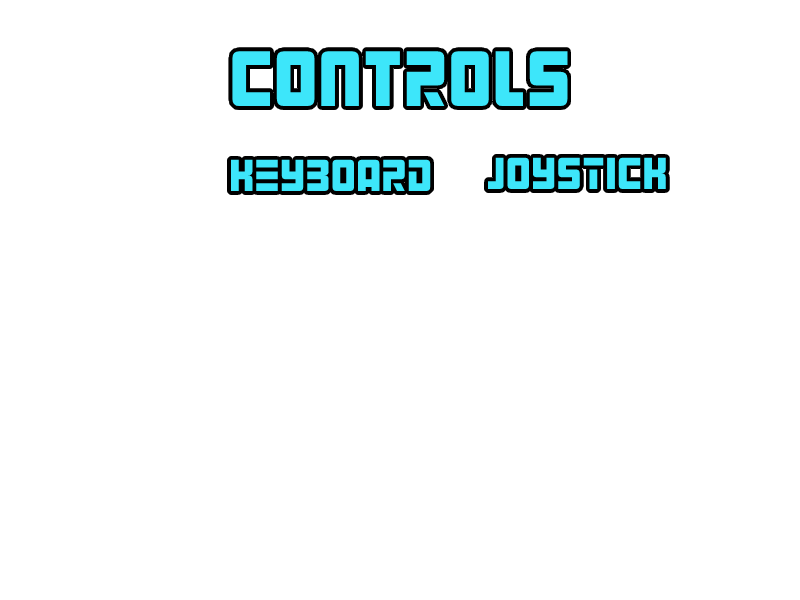
<style>
.page{position:relative;width:800px;height:600px;background:#ffffff}
.page>*{position:absolute;margin:0}
.t1{font:70px "AlienAndroid";color:#3de6fa}
.t2{font:40px "AlienAndroid";color:#3de6fa}
</style>
<div class="page">
<p class="t1" style="left:232px;top:51px;width:336px;height:55px">Controls</p>
<p class="t2" style="left:230px;top:159px;width:201px;height:32px">KEYBOARD</p>
<p class="t2" style="left:487px;top:157px;width:179px;height:32px">JOYSTICK</p>
</div>
